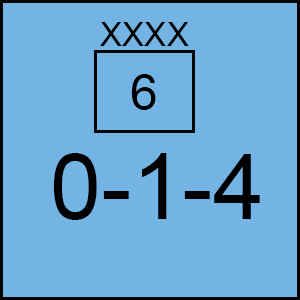
<style>
.page{position:relative;width:300px;height:300px;background:#74b4e4}
.page>*{position:absolute;margin:0}
.t1{font:33.3px "ArialMT";color:#000000}
.t2{font:50px "ArialMT";color:#000000}
.t3{font:91.7px "ArialMT";color:#000000}
</style>
<div class="page">
<p class="t1" style="left:100px;top:22px;width:89px;height:24px">XXXX</p>
<p class="t2" style="left:131px;top:74px;width:25px;height:36px">6</p>
<p class="t3" style="left:53px;top:153px;width:207px;height:67px">0-1-4</p>
</div>
